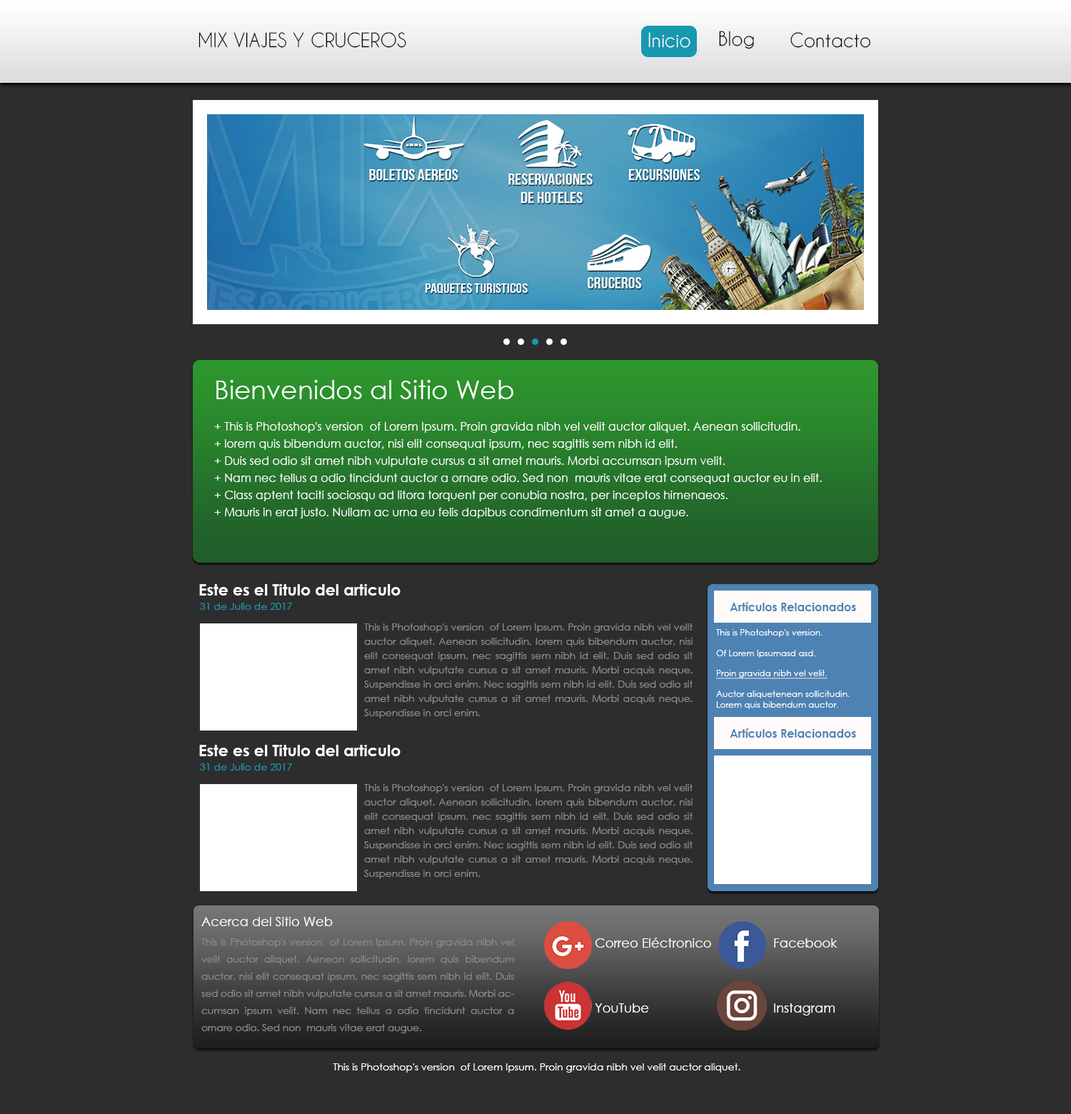
<style>
.page{position:relative;width:1071px;height:1114px;background:#2d2d2d}
.page>*{position:absolute;margin:0}
.t1{font:18.6px "CaviarDreams";color:#000000;text-transform:uppercase}
.t2{font:18.6px "CaviarDreams";color:#ffffff}
.t3{font:18.6px "CaviarDreams";color:#000000}
.t4{font:25.7px "CenturyGothic";color:#ffffff}
.t5{font:11.4px/17.1px "CenturyGothic";color:#ffffff}
.t6{font:15.7px "CenturyGothic-Bold";color:#ffffff}
.t7{font:10px "CenturyGothic";color:#1798af}
.t8{font:11.4px "CenturyGothic-Bold";color:#4d82b3}
.t9{font:10px/14.3px "CenturyGothic";color:#8c8c8c}
.t10{font:8.6px "CenturyGothic";color:#ffffff}
.t11{font:8.6px "CenturyGothic";color:#ffffff;text-decoration:underline}
.t12{font:12.8px "CenturyGothic";color:#ffffff}
.t13{font:10px/17.1px "CenturyGothic";color:#8c8c8c}
.t14{font:10px "CenturyGothic";color:#ffffff}
</style>
<div class="page">
<p class="t1" style="left:198px;top:32px;width:208px;height:16px">Mix Viajes y Cruceros</p>
<p class="t2" style="left:648px;top:32px;width:42px;height:16px">Inicio</p>
<p class="t3" style="left:719px;top:31px;width:35px;height:18px">Blog</p>
<p class="t3" style="left:790px;top:32px;width:80px;height:16px">Contacto</p>
<p class="t4" style="left:216px;top:380px;width:297px;height:19px">Bienvenidos al Sitio Web</p>
<p class="t5" style="left:214px;top:422px;width:608px;height:96px;text-align:justify">+ This is Photoshop's version  of Lorem Ipsum. Proin gravida nibh vel velit auctor aliquet. Aenean sollicitudin.<br>+ lorem quis bibendum auctor, nisi elit consequat ipsum, nec sagittis sem nibh id elit.<br>+ Duis sed odio sit amet nibh vulputate cursus a sit amet mauris. Morbi accumsan ipsum velit.<br>+ Nam nec tellus a odio tincidunt auctor a ornare odio. Sed non  mauris vitae erat consequat auctor eu in elit.<br>+ Class aptent taciti sociosqu ad litora torquent per conubia nostra, per inceptos himenaeos.<br>+ Mauris in erat justo. Nullam ac urna eu felis dapibus condimentum sit amet a augue.</p>
<p class="t6" style="left:199px;top:584px;width:201px;height:11px">Este es el Titulo del articulo</p>
<p class="t7" style="left:200px;top:602px;width:93px;height:8px">31 de Julio de 2017</p>
<p class="t8" style="left:730px;top:602px;width:126px;height:9px">Artículos Relacionados</p>
<p class="t9" style="left:364px;top:623px;width:328px;height:95px;text-align:justify">This is Photoshop's version  of Lorem Ipsum. Proin gravida nibh vel velit auctor aliquet. Aenean sollicitudin, lorem quis bibendum auctor, nisi elit consequat ipsum, nec sagittis sem nibh id elit. Duis sed odio sit amet nibh vulputate cursus a sit amet mauris. Morbi acquis neque. Suspendisse in orci enim. Nec sagittis sem nibh id elit. Duis sed odio sit amet nibh vulputate cursus a sit amet mauris. Morbi acquis neque. Suspendisse in orci enim.</p>
<p class="t10" style="left:716px;top:629px;width:133px;height:80px">This is Photoshop's version.<br><br>Of Lorem Ipsumasd asd. <br><span class="t11"><br>Proin gravida nibh vel velit.<br></span><br>Auctor aliquetenean sollicitudin.<br>Lorem quis bibendum auctor.</p>
<p class="t8" style="left:730px;top:728px;width:126px;height:9px">Artículos Relacionados</p>
<p class="t6" style="left:199px;top:745px;width:201px;height:11px">Este es el Titulo del articulo</p>
<p class="t7" style="left:200px;top:763px;width:93px;height:7px">31 de Julio de 2017</p>
<p class="t9" style="left:364px;top:784px;width:328px;height:95px;text-align:justify">This is Photoshop's version  of Lorem Ipsum. Proin gravida nibh vel velit auctor aliquet. Aenean sollicitudin, lorem quis bibendum auctor, nisi elit consequat ipsum, nec sagittis sem nibh id elit. Duis sed odio sit amet nibh vulputate cursus a sit amet mauris. Morbi acquis neque. Suspendisse in orci enim. Nec sagittis sem nibh id elit. Duis sed odio sit amet nibh vulputate cursus a sit amet mauris. Morbi acquis neque. Suspendisse in orci enim.</p>
<p class="t12" style="left:201px;top:917px;width:132px;height:9px">Acerca del Sitio Web</p>
<p class="t13" style="left:201px;top:938px;width:314px;height:95px;text-align:justify">This is Photoshop's version  of Lorem Ipsum. Proin gravida nibh vel velit auctor aliquet. Aenean sollicitudin, lorem quis bibendum auctor, nisi elit consequat ipsum, nec sagittis sem nibh id elit. Duis sed odio sit amet nibh vulputate cursus a sit amet mauris. Morbi accumsan ipsum velit. Nam nec tellus a odio tincidunt auctor a ornare odio. Sed non  mauris vitae erat augue.</p>
<p class="t12" style="left:595px;top:937px;width:116px;height:10px">Correo Eléctronico</p>
<p class="t12" style="left:774px;top:938px;width:63px;height:9px">Facebook</p>
<p class="t12" style="left:595px;top:1003px;width:54px;height:9px">YouTube</p>
<p class="t12" style="left:774px;top:1003px;width:60px;height:12px">Instagram</p>
<p class="t14" style="left:333px;top:1063px;width:407px;height:9px">This is Photoshop's version  of Lorem Ipsum. Proin gravida nibh vel velit auctor aliquet.</p>
</div>
